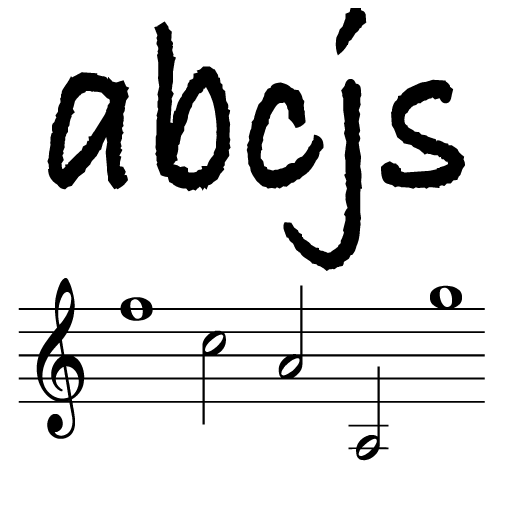
<style>
.page{position:relative;width:512px;height:512px;background:#ffffff}
.page>*{position:absolute;margin:0}
.t1{font:240px "BradleyHandITCTT-Bold";color:#000000;scale:0.83 1}
.t2{font:260px "Lassus";color:#000000;scale:0.83 1}
</style>
<div class="page">
<p class="t1" style="left:47px;top:8px;width:418px;height:263px">abcjs</p>
<p class="t2" style="left:18px;top:278px;width:467px;height:183px">`abcjs</p>
</div>
